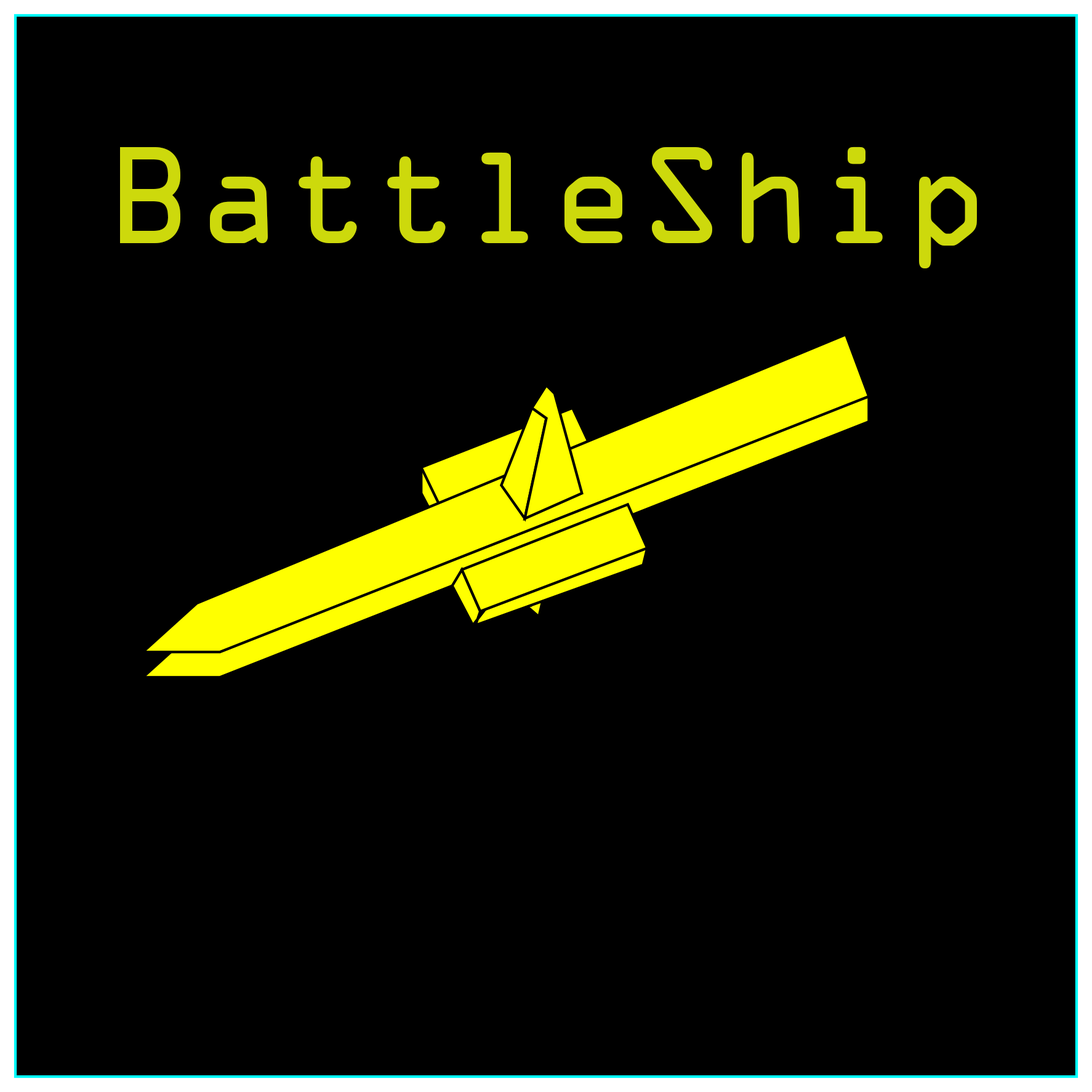
<style>
.page{position:relative;width:1092px;height:1092px;background:#000000}
.page>*{position:absolute;margin:0}
.t1{font:123.1px "OCRAStd";color:#cdd90c}
</style>
<div class="page">
<p class="t1" style="left:120px;top:147px;width:857px;height:121px">BattleShip</p>
</div>
